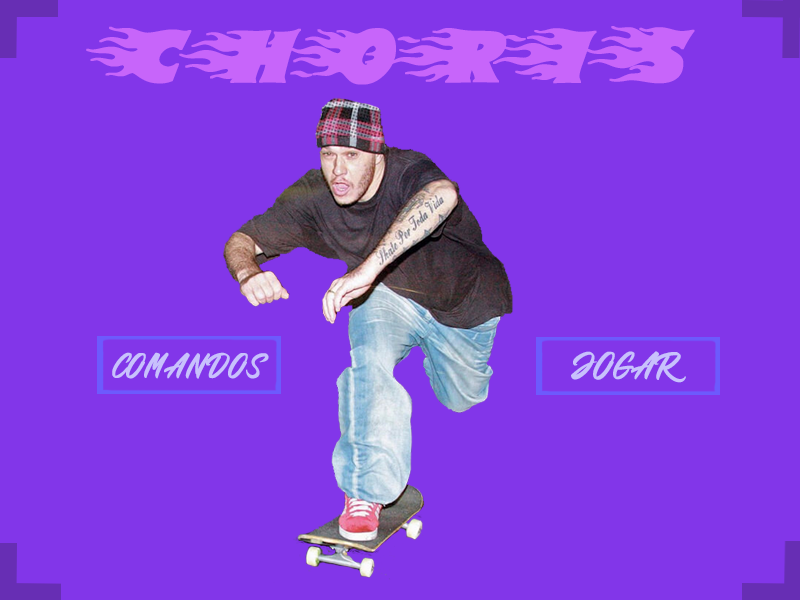
<style>
.page{position:relative;width:800px;height:600px;background:#8236e9}
.page>*{position:absolute;margin:0}
.t1{font:72px "Blazed";color:#c765fa;text-transform:uppercase;font-weight:bold;scale:0.97 1}
.t2{font:33.5px "BluePhantom";color:#c8c1fc;text-transform:uppercase;font-weight:bold}
.t3{font:36.7px "BluePhantom";color:#c8c1fc;text-transform:uppercase;font-weight:bold;scale:0.97 1}
</style>
<div class="page">
<p class="t1" style="left:86px;top:26px;width:609px;height:59px">choris</p>
<p class="t2" style="left:112px;top:352px;width:157px;height:27px">comandos</p>
<p class="t3" style="left:571px;top:351px;width:115px;height:32px">JOGAR</p>
</div>
